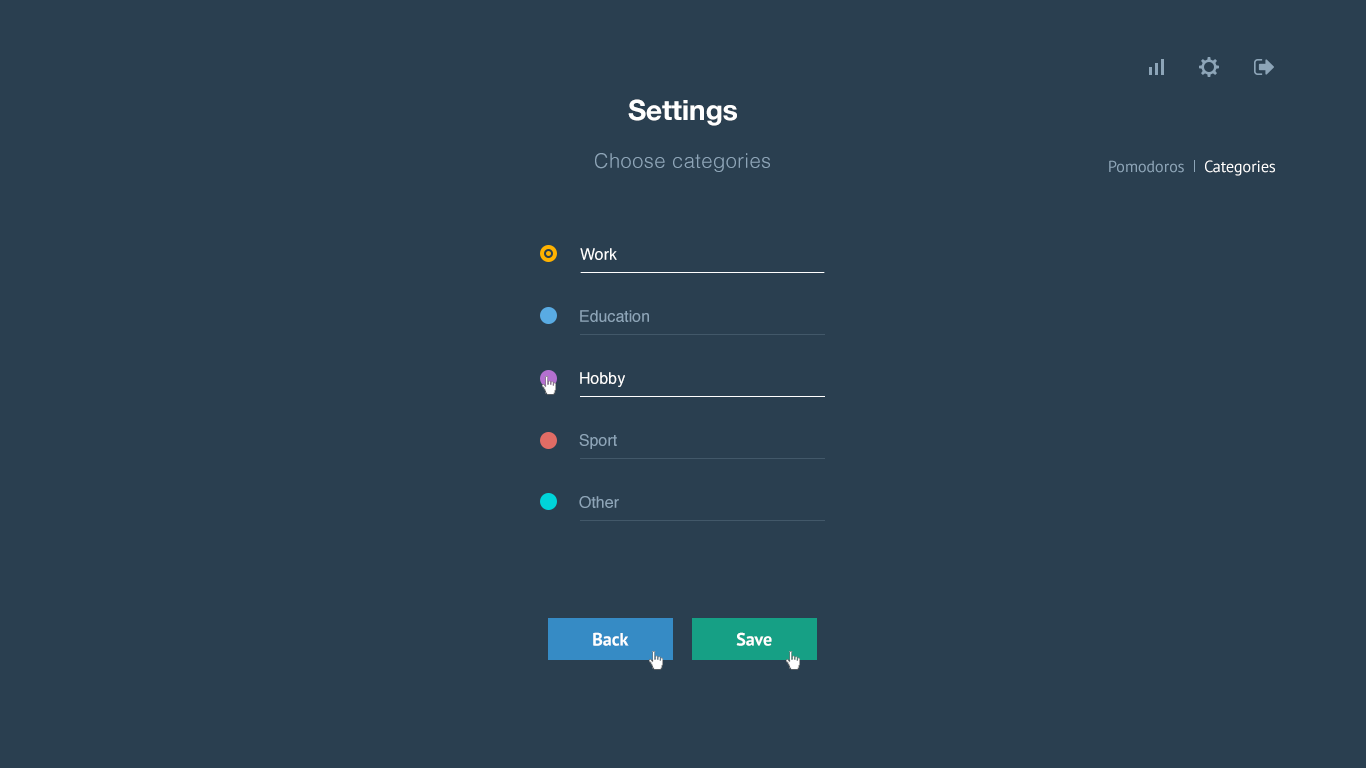
<style>
.page{position:relative;width:1366px;height:768px;background:#2a3f50}
.page>*{position:absolute;margin:0}
.t1{font:28px "HelveticaNeue-Bold";color:#ffffff}
.t2{font:20px "Helvetica-Light";letter-spacing:0.025em;color:#8da5b8}
.t3{font:16px "PTSans-Regular";color:#8da5b8}
.t4{font:16px "PTSans-Regular";color:#ffffff}
.t5{font:16px "Helvetica";color:#ffffff}
.t6{font:16px "Helvetica";color:#8da5b8}
.t7{font:18px "PTSans-Bold";color:#ffffff}
</style>
<div class="page">
<p class="t1" style="left:628px;top:99px;width:109px;height:27px">Settings</p>
<p class="t2" style="left:595px;top:153px;width:175px;height:19px">Choose categories</p>
<p class="t3" style="left:1109px;top:160px;width:75px;height:13px">Pomodoros</p>
<p class="t4" style="left:1205px;top:160px;width:70px;height:16px">Categories</p>
<p class="t5" style="left:580px;top:248px;width:37px;height:12px">Work</p>
<p class="t6" style="left:580px;top:310px;width:69px;height:12px">Education</p>
<p class="t5" style="left:580px;top:372px;width:45px;height:15px">Hobby</p>
<p class="t6" style="left:579px;top:434px;width:38px;height:15px">Sport</p>
<p class="t6" style="left:579px;top:496px;width:40px;height:12px">Other</p>
<p class="t7" style="left:593px;top:632px;width:36px;height:14px">Back</p>
<p class="t7" style="left:736px;top:632px;width:36px;height:14px">Save</p>
</div>
